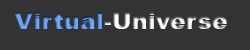
<style>
.page{position:relative;width:250px;height:50px;background:#333333}
.page>*{position:absolute;margin:0}
.t1{font:24px "Arial-Black"}
</style>
<div class="page">
<p class="t1" style="left:14px;top:12px;width:213px;height:17px">Virtual-Universe</p>
</div>
